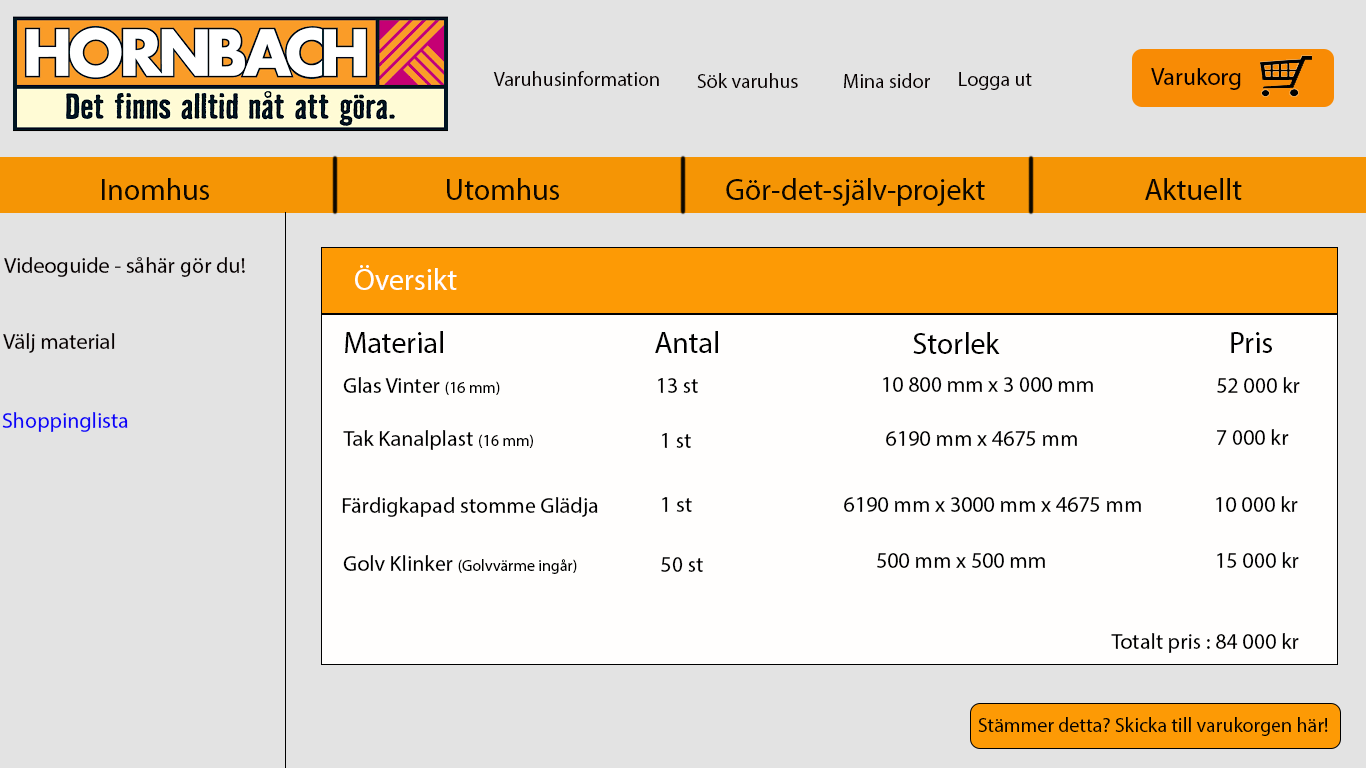
<style>
.page{position:relative;width:1366px;height:768px;background:#e3e3e3}
.page>*{position:absolute;margin:0}
.t1{font:20px "MyriadPro-Regular";color:#060000}
.t2{font:24px "MyriadPro-Regular";color:#060000}
.t3{font:30px "MyriadPro-Regular";color:#0b0700}
.t4{font:22px "MyriadPro-Regular";color:#060000}
.t5{font:30px "MyriadPro-Regular";color:#fffefd}
.t6{font:30px "MyriadPro-Regular";color:#010000}
.t7{font:30px "MyriadPro-Regular";color:#000000}
.t8{font:22px "MyriadPro-Regular";color:#000000}
.t9{font:16px "MyriadPro-Regular";color:#000000}
.t10{font:22px "MyriadPro-Regular";color:#0f04f8}
.t11{font:20px "MyriadPro-Regular";color:#030200}
</style>
<div class="page">
<p class="t1" style="left:493px;top:71px;width:166px;height:15px">Varuhusinformation</p>
<p class="t1" style="left:697px;top:73px;width:101px;height:15px">Sök varuhus</p>
<p class="t1" style="left:844px;top:73px;width:86px;height:15px">Mina sidor</p>
<p class="t1" style="left:959px;top:72px;width:73px;height:18px">Logga ut</p>
<p class="t2" style="left:1151px;top:68px;width:90px;height:22px">Varukorg</p>
<p class="t3" style="left:102px;top:178px;width:107px;height:22px">Inomhus</p>
<p class="t3" style="left:447px;top:178px;width:112px;height:22px">Utomhus</p>
<p class="t3" style="left:726px;top:178px;width:259px;height:28px">Gör-det-själv-projekt</p>
<p class="t3" style="left:1145px;top:178px;width:97px;height:22px">Aktuellt</p>
<p class="t4" style="left:4px;top:257px;width:241px;height:20px">Videoguide - såhär gör du!</p>
<p class="t5" style="left:355px;top:265px;width:102px;height:25px">Översikt</p>
<p class="t4" style="left:3px;top:333px;width:112px;height:20px">Välj material</p>
<p class="t6" style="left:345px;top:331px;width:98px;height:22px">Material</p>
<p class="t7" style="left:655px;top:331px;width:63px;height:22px">Antal</p>
<p class="t7" style="left:913px;top:332px;width:87px;height:22px">Storlek</p>
<p class="t7" style="left:1231px;top:332px;width:41px;height:21px">Pris</p>
<p class="t8" style="left:343px;top:377px;width:157px;height:18px">Glas Vinter <span class="t9">(16 mm)</span></p>
<p class="t8" style="left:883px;top:377px;width:210px;height:15px">10 800 mm x 3 000 mm</p>
<p class="t8" style="left:1217px;top:377px;width:83px;height:16px">52 000 kr</p>
<p class="t8" style="left:658px;top:378px;width:40px;height:15px">13 st</p>
<p class="t10" style="left:2px;top:412px;width:126px;height:20px">Shoppinglista</p>
<p class="t8" style="left:343px;top:430px;width:190px;height:20px">Tak Kanalplast <span class="t9">(16 mm)</span></p>
<p class="t8" style="left:662px;top:433px;width:29px;height:15px">1 st</p>
<p class="t8" style="left:886px;top:431px;width:191px;height:15px">6190 mm x 4675 mm</p>
<p class="t8" style="left:1217px;top:429px;width:72px;height:16px">7 000 kr</p>
<p class="t8" style="left:342px;top:497px;width:256px;height:20px">Färdigkapad stomme Glädja</p>
<p class="t8" style="left:662px;top:497px;width:30px;height:15px">1 st</p>
<p class="t8" style="left:844px;top:497px;width:297px;height:15px">6190 mm x 3000 mm x 4675 mm</p>
<p class="t8" style="left:1216px;top:496px;width:82px;height:16px">10 000 kr</p>
<p class="t9" style="left:343px;top:555px;width:234px;height:19px"><span class="t8">Golv Klinker </span>(Golvvärme ingår)</p>
<p class="t8" style="left:661px;top:557px;width:42px;height:15px">50 st</p>
<p class="t8" style="left:877px;top:553px;width:168px;height:15px">500 mm x 500 mm</p>
<p class="t8" style="left:1217px;top:552px;width:82px;height:16px">15 000 kr</p>
<p class="t8" style="left:1111px;top:633px;width:188px;height:20px">Totalt pris : 84 000 kr</p>
<p class="t11" style="left:978px;top:717px;width:350px;height:19px">Stämmer detta? Skicka till varukorgen här!</p>
</div>
